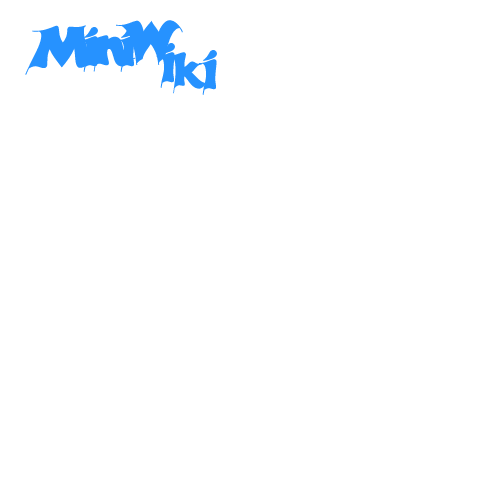
<style>
.page{position:relative;width:500px;height:500px;background:#ffffff}
.page>*{position:absolute;margin:0}
.t1{font:58px "Candles";color:#2692ff}
.t2{font:49px "Candles";color:#2692ff}
</style>
<div class="page">
<p class="t1" style="left:25px;top:25px;width:73px;height:50px">M</p>
<p class="t1" style="left:79px;top:27px;width:19px;height:45px">i</p>
<p class="t1" style="left:116px;top:20px;width:67px;height:45px">W</p>
<p class="t1" style="left:116px;top:27px;width:19px;height:45px">i</p>
<p class="t1" style="left:89px;top:35px;width:47px;height:37px">n</p>
<p class="t1" style="left:156px;top:43px;width:19px;height:45px">i</p>
<p class="t2" style="left:168px;top:52px;width:43px;height:42px">k</p>
<p class="t1" style="left:198px;top:50px;width:19px;height:45px">i</p>
</div>
